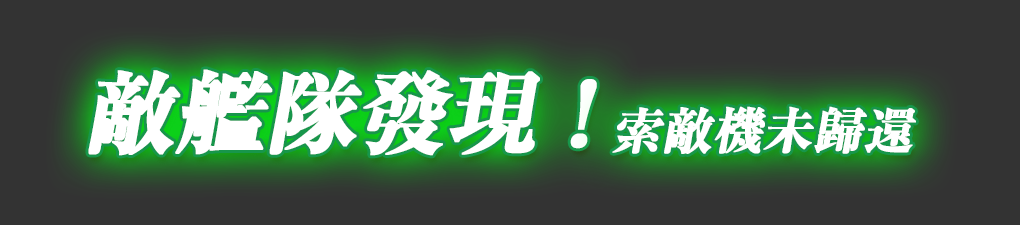
<style>
.page{position:relative;width:1020px;height:225px;background:#333333}
.page>*{position:absolute;margin:0}
.t1{font:90px "RyuminPr6N-ExBold";letter-spacing:-0.025em;color:#ffffff;font-weight:bold;font-style:italic}
.t2{font:50px "RyuminPr6N-ExBold";letter-spacing:-0.025em;color:#ffffff;font-weight:bold;font-style:italic}
</style>
<div class="page">
<p class="t1" style="left:88px;top:69px;width:509px;height:87px">敵艦隊發現 !</p>
<p class="t2" style="left:612px;top:106px;width:304px;height:48px">索敵機未歸還</p>
</div>
